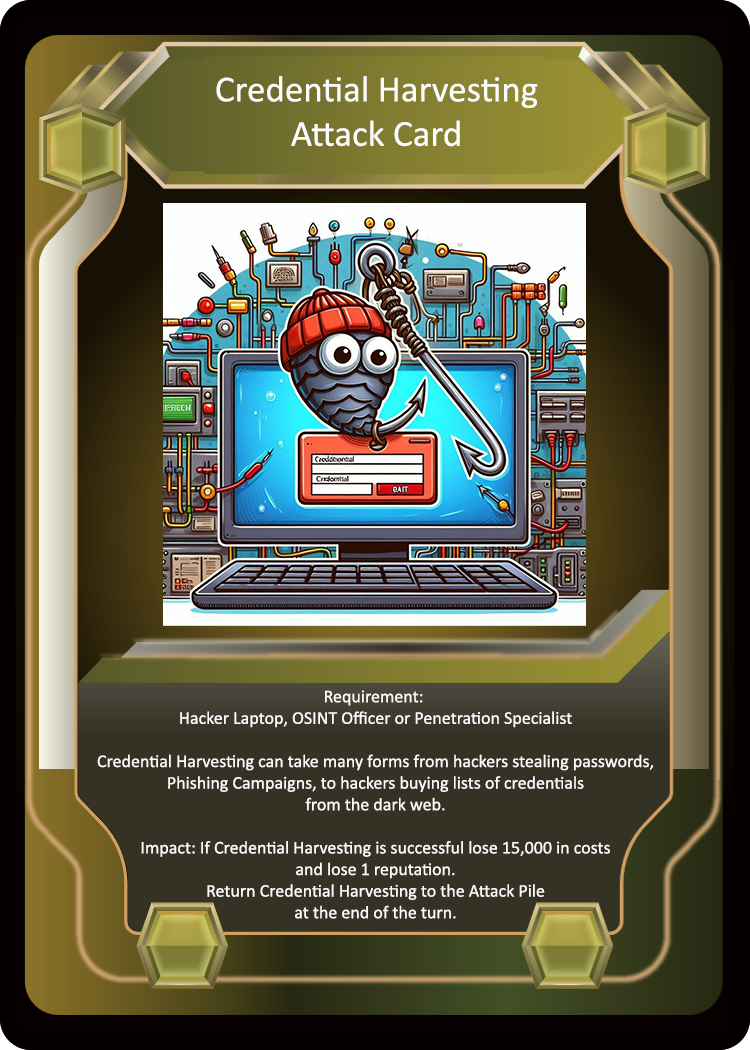
<style>
.page{position:relative;width:750px;height:1050px}
.page>*{position:absolute;margin:0}
.t1{font:37px "Calibri";color:#fcfbfb}
.t2{font:18px "Calibri";color:#fcfbfb}
</style>
<div class="page">
<p class="t1" style="left:216px;top:76px;width:322px;height:71px;text-align:center">Credential Harvesting<br>Attack Card</p>
<p class="t2" style="left:97px;top:690px;width:556px;height:229px;text-align:center">Requirement: <br>Hacker Laptop, OSINT Officer or Penetration Specialist<br><br>Credential Harvesting can take many forms from hackers stealing passwords,<br>Phishing Campaigns, to hackers buying lists of credentials<br>from the dark web.<br><br>Impact: If Credential Harvesting is successful lose 15,000 in costs<br>and lose 1 reputation.<br>Return Credential Harvesting to the Attack Pile<br>at the end of the turn.</p>
</div>
